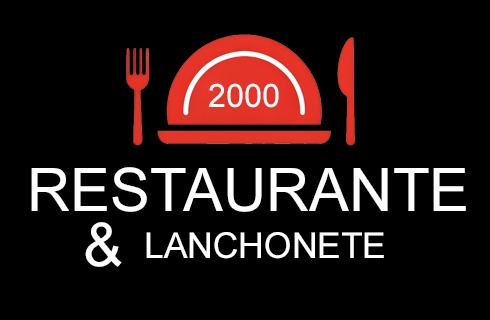
<style>
.page{position:relative;width:490px;height:320px;background:#000000}
.page>*{position:absolute;margin:0}
.t1{font:32.4px "ArialMT";color:#ffffff}
.t2{font:60px "ArialMT";color:#ffffff}
.t3{font:35.4px "ArialMT";color:#ffffff}
</style>
<div class="page">
<p class="t1" style="left:209px;top:83px;width:70px;height:25px">2000</p>
<p class="t2" style="left:31px;top:167px;width:435px;height:45px">RESTAURANTE</p>
<p class="t2" style="left:85px;top:222px;width:37px;height:45px">&amp;</p>
<p class="t3" style="left:146px;top:232px;width:238px;height:27px">LANCHONETE</p>
</div>
